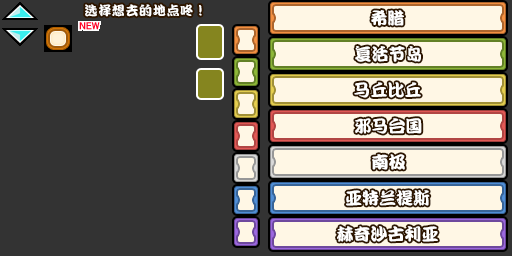
<style>
.page{position:relative;width:512px;height:256px;background:#333333}
.page>*{position:absolute;margin:0}
.t1{font:13px "DFPKanTingLiuW9";letter-spacing:0.05em;color:#ffffff}
.t2{font:17px "DFPKanTingLiuW9";color:#ffffff}
</style>
<div class="page">
<p class="t1" style="left:85px;top:4px;width:117px;height:13px">选择想去的地点咚！</p>
<p class="t2" style="left:371px;top:10px;width:33px;height:16px">希腊</p>
<p class="t2" style="left:355px;top:46px;width:66px;height:16px">复活节岛</p>
<p class="t2" style="left:354px;top:82px;width:67px;height:16px">马丘比丘</p>
<p class="t2" style="left:355px;top:118px;width:67px;height:16px">邪马台国</p>
<p class="t2" style="left:372px;top:154px;width:33px;height:16px">南极</p>
<p class="t2" style="left:346px;top:190px;width:84px;height:16px">亚特兰提斯</p>
<p class="t2" style="left:337px;top:226px;width:101px;height:16px">赫奇沙古利亚</p>
</div>
